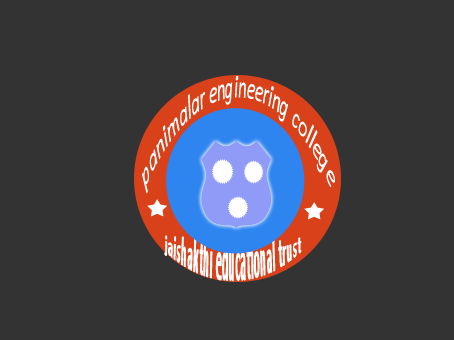
<style>
.page{position:relative;width:454px;height:340px;background:#333333}
.page>*{position:absolute;margin:0}
.t1{font:33.9px "Calibri-Italic";color:#fffefe;scale:0.42 1}
.t2{font:23.3px "Calibri-Bold";color:#ffffff;scale:0.52 1}
</style>
<div class="page">
<p class="t1" style="left:142px;top:75px;width:193px;height:119px">panimalar engineering college</p>
<p class="t2" style="left:164px;top:235px;width:138px;height:47px">jaishakthi educational trust</p>
</div>
